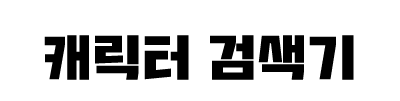
<style>
.page{position:relative;width:400px;height:101px;background:#ffffff}
.page>*{position:absolute;margin:0}
.t1{font:50px "Typo_SsangmunDong_B";color:#000000}
</style>
<div class="page">
<p class="t1" style="left:44px;top:35px;width:310px;height:45px">캐릭터 검색기</p>
</div>
